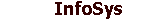
<style>
.page{position:relative;width:144px;height:19px;background:#ffffff}
.page>*{position:absolute;margin:0}
.t1{font:18px "Tahoma-Bold";color:#330000}
.t2{font:18px "Tahoma-Bold";color:#ffffff}
</style>
<div class="page">
<p class="t1" style="left:2px;top:1px;width:120px;height:18px"><span class="t2">PNRI </span>InfoSys</p>
</div>
